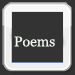
<style>
.page{position:relative;width:75px;height:75px;background:#333333}
.page>*{position:absolute;margin:0}
.t1{font:14px "Georgia";color:#f1f7ef}
</style>
<div class="page">
<p class="t1" style="left:14px;top:36px;width:41px;height:11px">Poems</p>
</div>
